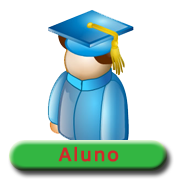
<style>
.page{position:relative;width:180px;height:180px;background:#ffffff}
.page>*{position:absolute;margin:0}
.t1{font:18px "Tahoma";letter-spacing:0.1em;color:#d02a2a;font-weight:bold;scale:1.1 1}
</style>
<div class="page">
<p class="t1" style="left:58px;top:146px;width:61px;height:16px">Aluno</p>
</div>
